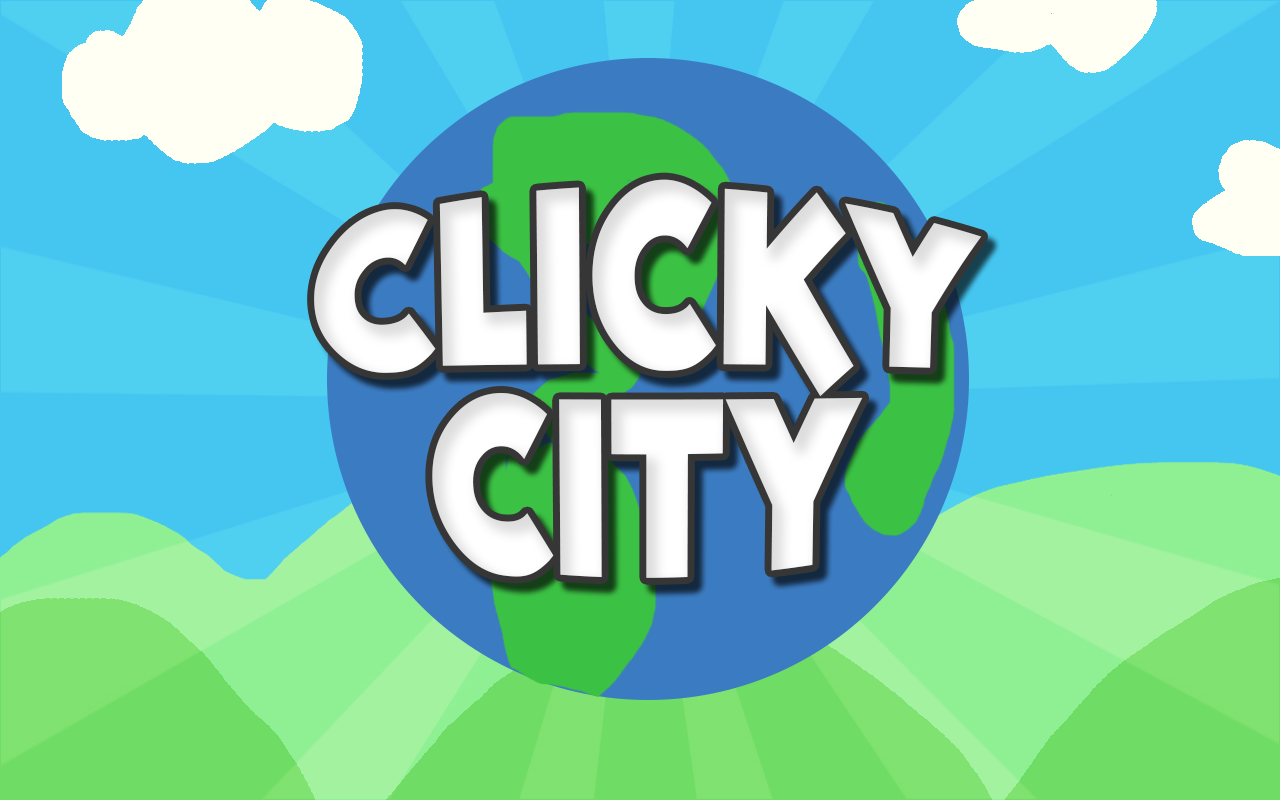
<style>
.page{position:relative;width:1280px;height:800px}
.page>*{position:absolute;margin:0}
.t1{font:190.8px/159px "DOCK11-Heavy";color:#ffffff}
</style>
<div class="page">
<p class="t1" style="left:314px;top:179px;width:668px;height:399px;text-align:center">CLICKY<br>CITY</p>
</div>
